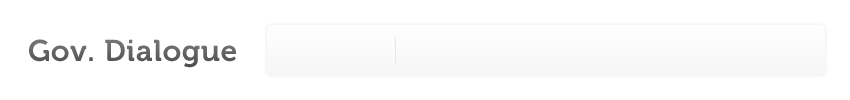
<style>
.page{position:relative;width:850px;height:100px;background:#ffffff}
.page>*{position:absolute;margin:0}
.t1{font:30px "Museo-700";letter-spacing:0.02em;color:#5c5c5d}
</style>
<div class="page">
<p class="t1" style="left:29px;top:39px;width:207px;height:29px">Gov. Dialogue</p>
</div>
